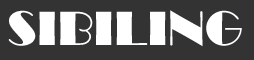
<style>
.page{position:relative;width:254px;height:60px;background:#333333}
.page>*{position:absolute;margin:0}
.t1{font:50px "Broadway";color:#ffffff}
</style>
<div class="page">
<p class="t1" style="left:8px;top:10px;width:234px;height:37px">SIBILING</p>
</div>
